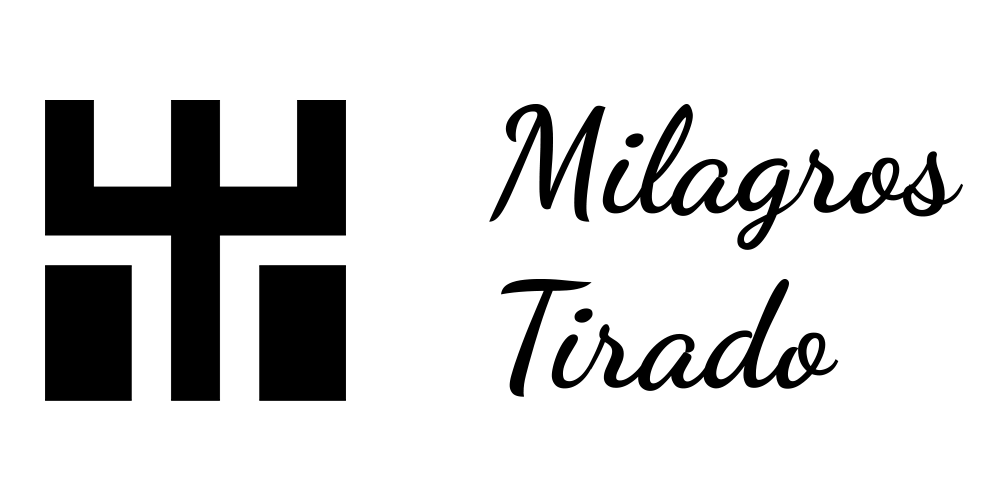
<style>
.page{position:relative;width:1000px;height:500px;background:#ffffff}
.page>*{position:absolute;margin:0}
.t1{font:145.8px "DancingScript-Bold";color:#000000}
</style>
<div class="page">
<p class="t1" style="left:489px;top:104px;width:475px;height:293px">Milagros<br>Tirado</p>
</div>
